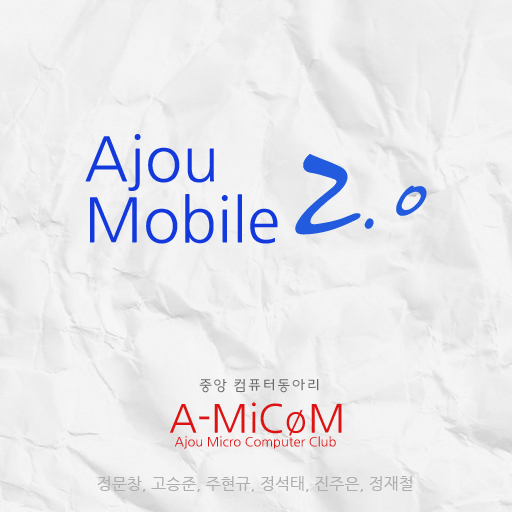
<style>
.page{position:relative;width:512px;height:512px}
.page>*{position:absolute;margin:0}
.t1{font:61.1px/61.1px "NanumGothic";color:#1339dd}
.t2{font:266.4px "HaanCjaM";color:#225bde;scale:0.71 1}
.t3{font:114.6px "HaanCjaM";color:#225bde}
.t4{font:14.7px "HYkanM";color:#6a6a6a}
.t5{font:38.8px "NanumGothic";color:#dd1313}
.t6{font:12.9px "NanumGothic";color:#dd1313}
.t7{font:16px "NanumGothic";color:#aeaeae}
</style>
<div class="page">
<p class="t1" style="left:85px;top:134px;width:193px;height:110px">Ajou<br>Mobile</p>
<p class="t2" style="left:295px;top:154px;width:66px;height:81px">2</p>
<p class="t3" style="left:364px;top:185px;width:63px;height:44px">.0</p>
<p class="t4" style="left:199px;top:379px;width:120px;height:14px">중앙 컴퓨터동아리</p>
<p class="t5" style="left:170px;top:402px;width:172px;height:34px">A-MiCøM</p>
<p class="t6" style="left:174px;top:436px;width:162px;height:13px">Ajou Micro Computer Club</p>
<p class="t7" style="left:97px;top:476px;width:316px;height:16px">정문창, 고승준, 주현규, 정석태, 진주은, 정재철</p>
</div>
